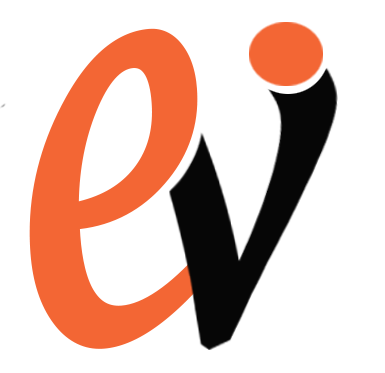
<style>
.page{position:relative;width:385px;height:373px;background:#ffffff}
.page>*{position:absolute;margin:0}
.t1{font:549.1px "LucidaCalligraphy-Italic";color:#f36634;font-weight:bold;scale:0.71 1}
</style>
<div class="page">
<p class="t1" style="left:29px;top:28px;width:181px;height:321px;rotate:-5deg">e</p>
</div>
